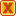
<style>
.page{position:relative;width:18px;height:18px;background:#be430d}
.page>*{position:absolute;margin:0}
.t1{font:20px "Roboto-Bold";color:#be430d;scale:1.05 1}
</style>
<div class="page">
<p class="t1" style="left:2px;top:2px;width:12px;height:12px">x</p>
</div>
